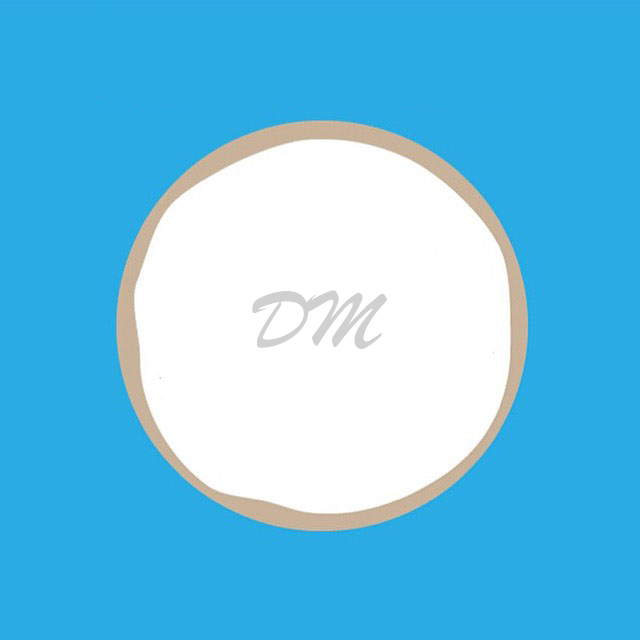
<style>
.page{position:relative;width:640px;height:640px;background:#2aabe4}
.page>*{position:absolute;margin:0}
.t1{font:86px "BrushScriptMT";color:#d0d0d0}
</style>
<div class="page">
<p class="t1" style="left:252px;top:290px;width:135px;height:59px">DM</p>
</div>
